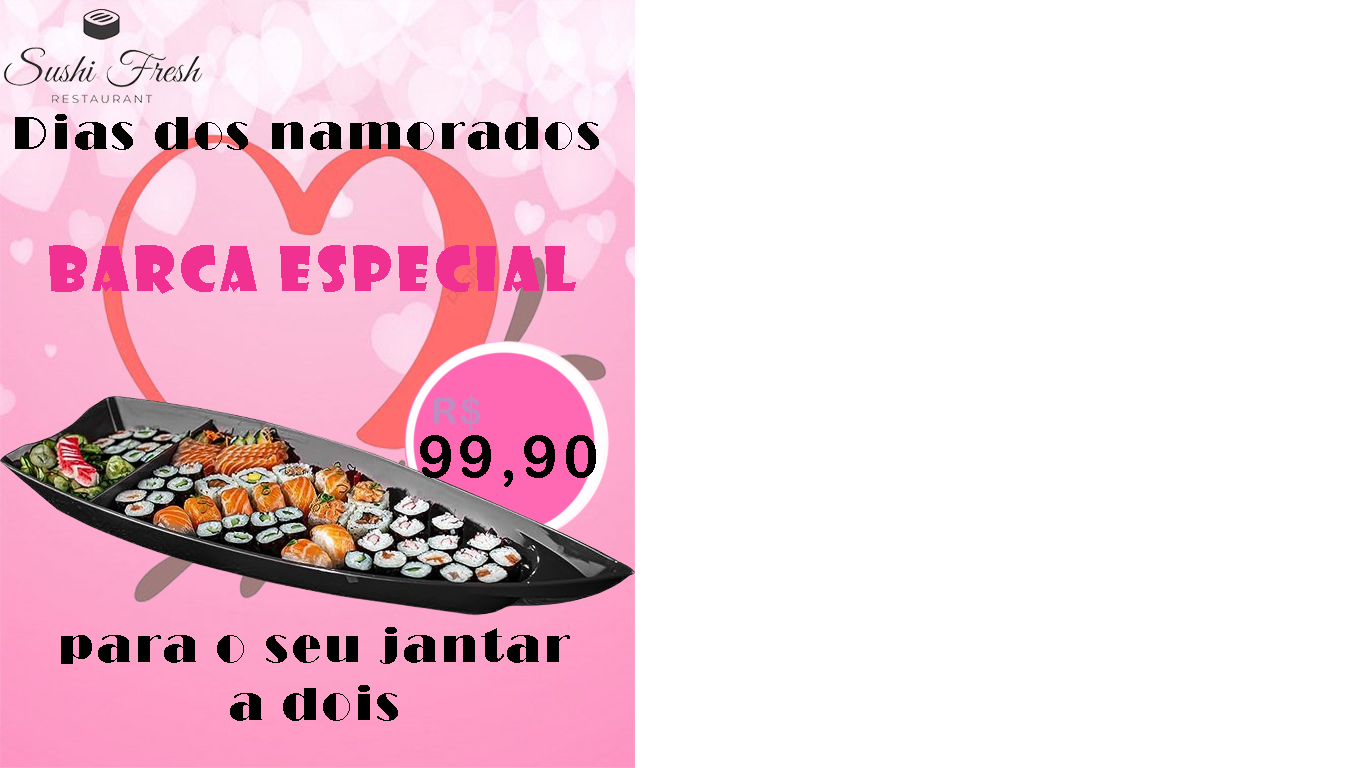
<style>
.page{position:relative;width:1366px;height:768px;background:#ffffff}
.page>*{position:absolute;margin:0}
.t1{font:48px "Broadway";letter-spacing:0.08em;color:#020201}
.t2{font:60px "ShowcardGothic-Reg";letter-spacing:0.08em;color:#f03191}
.t3{font:36px "ArialRoundedMTBold";letter-spacing:0.08em;color:#c38bc4}
.t4{font:60px "ArialRoundedMTBold";letter-spacing:0.08em;color:#000000}
.t5{font:48px "Broadway";letter-spacing:0.08em;color:#000000}
</style>
<div class="page">
<p class="t1" style="left:15px;top:114px;width:584px;height:36px">Dias dos namorados</p>
<p class="t2" style="left:49px;top:245px;width:527px;height:49px">barca especial</p>
<p class="t3" style="left:434px;top:395px;width:46px;height:36px">R$</p>
<p class="t4" style="left:420px;top:435px;width:176px;height:52px">99,90</p>
<p class="t5" style="left:61px;top:627px;width:509px;height:94px;text-align:center">para o seu jantar<br>a dois</p>
</div>
